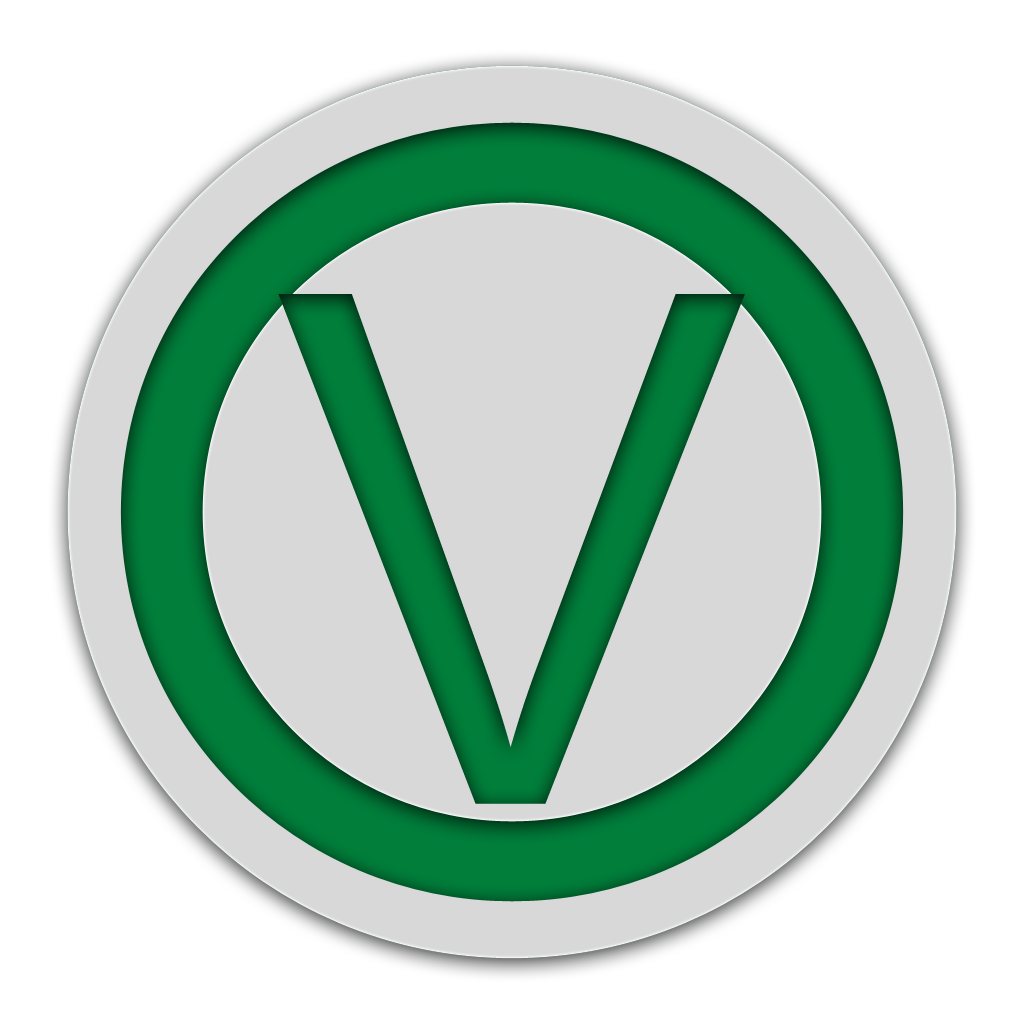
<style>
.page{position:relative;width:1024px;height:1024px;background:#d8d8d8}
.page>*{position:absolute;margin:0}
.t1{font:711.1px "ArialMT";color:#007938}
</style>
<div class="page">
<p class="t1" style="left:278px;top:294px;width:467px;height:510px">V</p>
</div>
